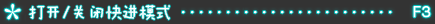
<style>
.page{position:relative;width:435px;height:24px;background:#333333}
.page>*{position:absolute;margin:0}
.t1{font:18px "¢è?";color:#ffffff}
</style>
<div class="page">
<p class="t1" style="left:29px;top:5px;width:141px;height:15px">打开/关闭快进模式</p>
</div>
